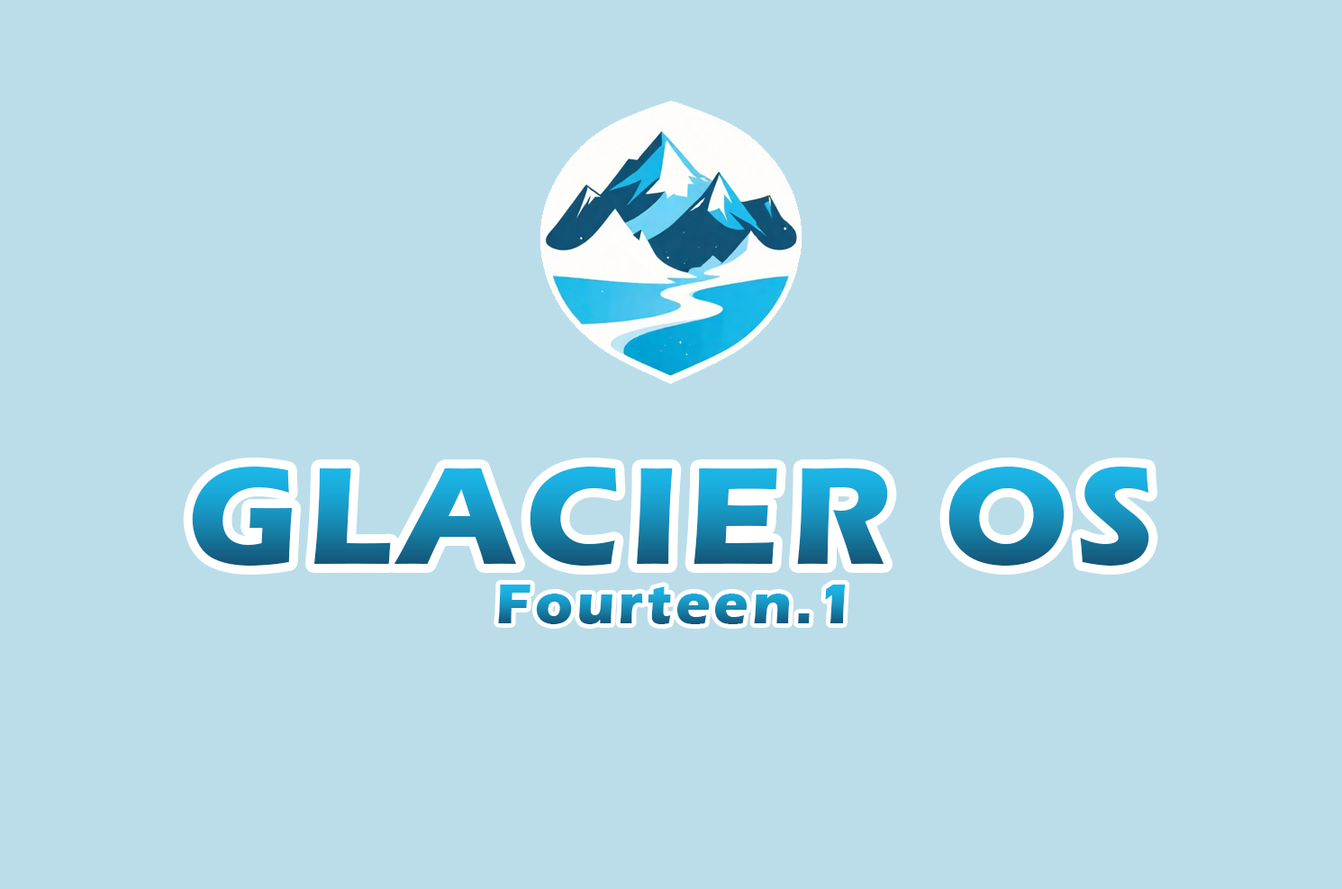
<style>
.page{position:relative;width:1342px;height:889px;background:#badde9}
.page>*{position:absolute;margin:0}
.t1{font:143.2px "ErasITC-Bold";letter-spacing:0.06em}
.t2{font:58.5px "ErasITC-Bold";letter-spacing:0.06em}
</style>
<div class="page">
<p class="t1" style="left:192px;top:466px;width:957px;height:99px">GLACIER OS</p>
<p class="t2" style="left:498px;top:584px;width:348px;height:40px">Fourteen.1</p>
</div>
